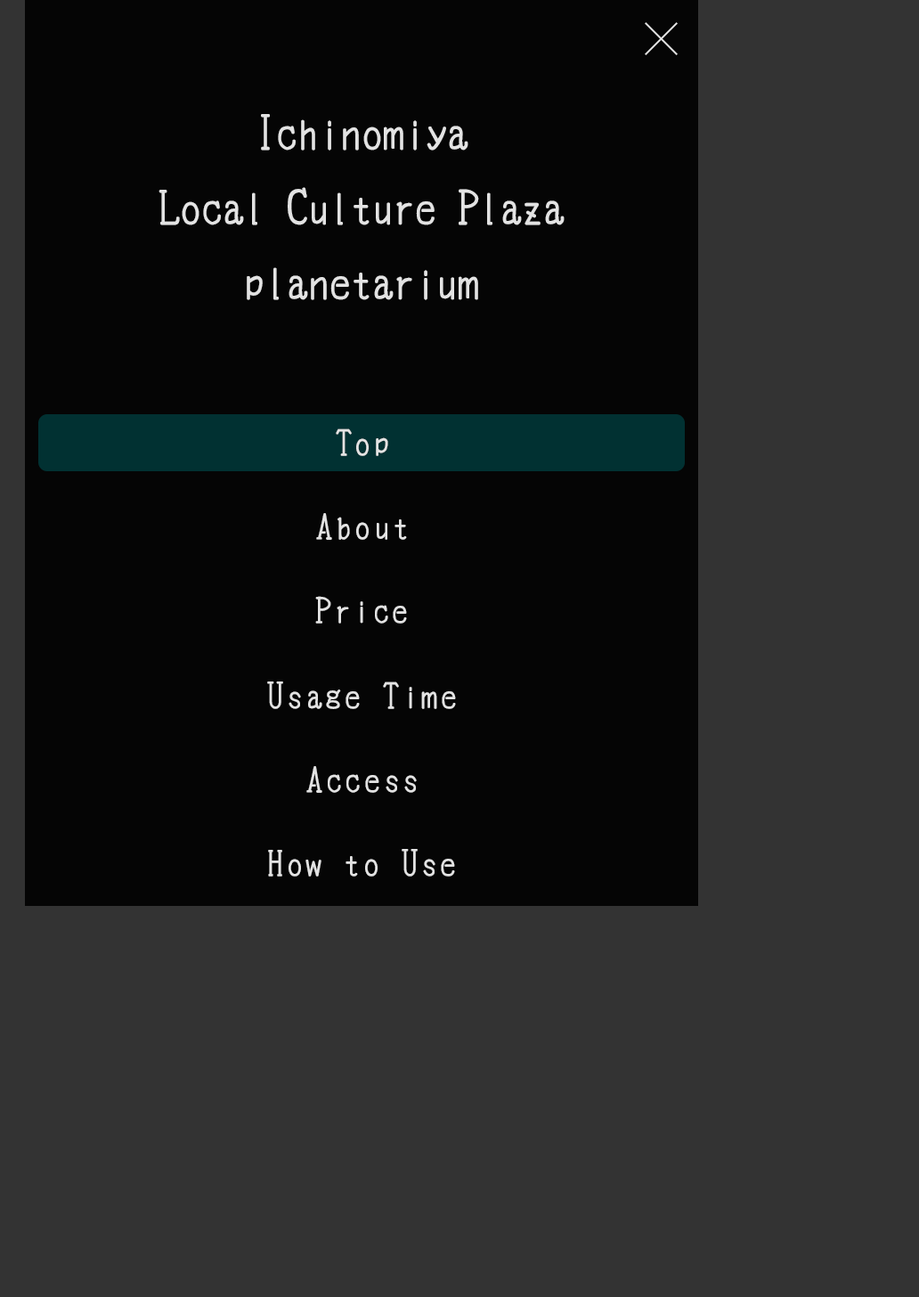
<style>
.page{position:relative;width:919px;height:1297px;background:#333333}
.page>*{position:absolute;margin:0}
.t1{font:42.8px "cinecaption";color:#e3e3e3}
.t2{font:32.1px "cinecaption";letter-spacing:0.1em;color:#e3e3e3}
</style>
<div class="page">
<p class="t1" style="left:159px;top:114px;width:406px;height:186px;text-align:center">Ichinomiya<br>Local Culture Plaza<br>planetarium</p>
<p class="t2" style="left:336px;top:428px;width:52px;height:28px">Top</p>
<p class="t2" style="left:316px;top:513px;width:91px;height:27px">About</p>
<p class="t2" style="left:315px;top:596px;width:92px;height:28px">Price</p>
<p class="t2" style="left:267px;top:681px;width:189px;height:28px">Usage Time</p>
<p class="t2" style="left:306px;top:766px;width:111px;height:27px">Access</p>
<p class="t2" style="left:268px;top:849px;width:187px;height:28px">How to Use</p>
</div>
